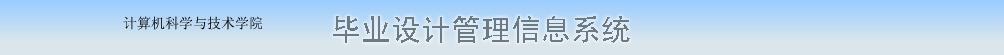
<style>
.page{position:relative;width:1004px;height:55px;background:#dbe6ec}
.page>*{position:absolute;margin:0}
.t1{font:14px "SimSun";color:#000000}
.t2{font:30px "SimHei";color:#6c7b83}
</style>
<div class="page">
<p class="t1" style="left:123px;top:16px;width:140px;height:14px">计算机科学与技术学院</p>
<p class="t2" style="left:333px;top:16px;width:297px;height:27px">毕业设计管理信息系统</p>
</div>
